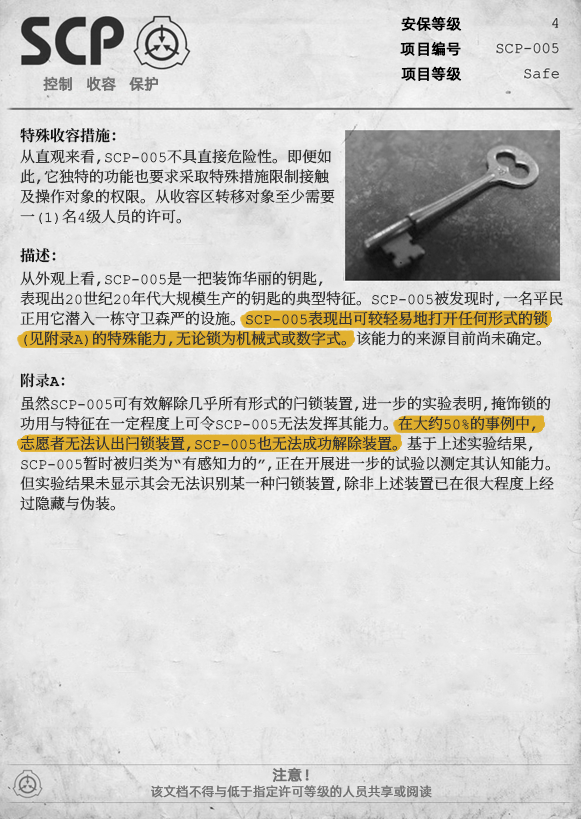
<style>
.page{position:relative;width:581px;height:819px}
.page>*{position:absolute;margin:0}
.t1{font:15px "AlibabaPuHuiTiR";color:#000000;font-weight:bold}
.t2{font:15px "AlibabaPuHuiTiR";color:#707070;font-weight:bold}
.t3{font:15px "ContainmentBreach-Bold";color:#121212}
.t4{font:15px/20px "ContainmentBreach-Regular";color:#353535}
.t5{font:13px "AlibabaPuHuiTiR";color:#707070}
</style>
<div class="page">
<p class="t1" style="left:401px;top:16px;width:61px;height:15px">安保等级</p>
<p class="t1" style="left:400px;top:41px;width:61px;height:15px">项目编号</p>
<p class="t2" style="left:43px;top:76px;width:115px;height:15px">控制   收容   保护</p>
<p class="t1" style="left:401px;top:66px;width:61px;height:15px">项目等级</p>
<p class="t3" style="left:20px;top:128px;width:96px;height:15px">特殊收容措施：</p>
<p class="t4" style="left:20px;top:149px;width:315px;height:75px">从直观来看，SCP-005不具直接危险性。即便如<br>此，它独特的功能也要求采取特殊措施限制接触<br>及操作对象的权限。从收容区转移对象至少需要<br>一（1）名4级人员的许可。</p>
<p class="t3" style="left:20px;top:248px;width:36px;height:15px">描述：</p>
<p class="t4" style="left:20px;top:271px;width:543px;height:76px">从外观上看，SCP-005是一把装饰华丽的钥匙，<br>表现出20世纪20年代大规模生产的钥匙的典型特征。SCP-005被发现时，一名平民<br>正用它潜入一栋守卫森严的设施。SCP-005表现出可较轻易地打开任何形式的锁<br>（见附录A）的特殊能力，无论锁为机械式或数字式。该能力的来源目前尚未确定。</p>
<p class="t3" style="left:20px;top:373px;width:45px;height:15px">附录A：</p>
<p class="t4" style="left:20px;top:396px;width:534px;height:115px">虽然SCP-005可有效解除几乎所有形式的闩锁装置，进一步的实验表明，掩饰锁的<br>功用与特征在一定程度上可令SCP-005无法发挥其能力。在大约50%的事例中，<br>志愿者无法认出闩锁装置，SCP-005也无法成功解除装置。基于上述实验结果，<br>SCP-005暂时被归类为“有感知力的”，正在开展进一步的试验以测定其认知能力。<br>但实验结果未显示其会无法识别某一种闩锁装置，除非上述装置已在很大程度上经<br>过隐藏与伪装。</p>
<p class="t2" style="left:272px;top:767px;width:37px;height:15px">注意！</p>
<p class="t5" style="left:151px;top:785px;width:281px;height:13px">该文档不得与低于指定许可等级的人员共享或阅读</p>
</div>
